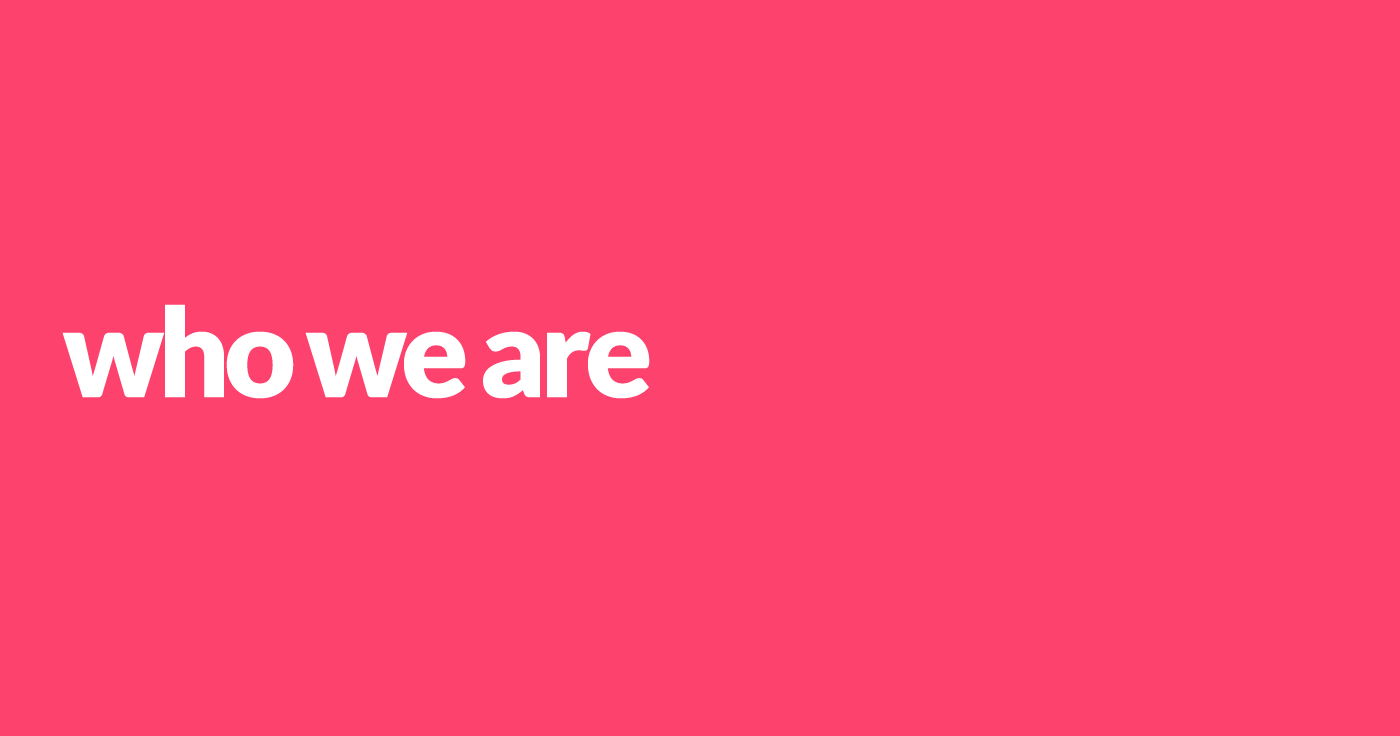
<style>
.page{position:relative;width:1400px;height:736px;background:#fd436d}
.page>*{position:absolute;margin:0}
.t1{font:124.3px "Lato-Black";letter-spacing:-0.08em;color:#ffffff;font-weight:bold}
</style>
<div class="page">
<p class="t1" style="left:62px;top:304px;width:588px;height:95px">who we are</p>
</div>
